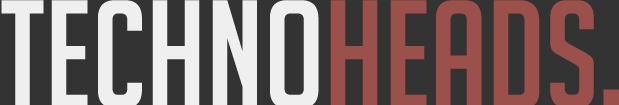
<style>
.page{position:relative;width:619px;height:105px;background:#333333}
.page>*{position:absolute;margin:0}
.t1{font:150px "BigNoodleTitling";color:#efefef}
.t2{font:150px "BigNoodleTitling";color:#9c504b}
</style>
<div class="page">
<p class="t1" style="left:1px;top:0px;width:618px;height:105px">TECHNO<span class="t2">HEaDS.</span></p>
</div>
